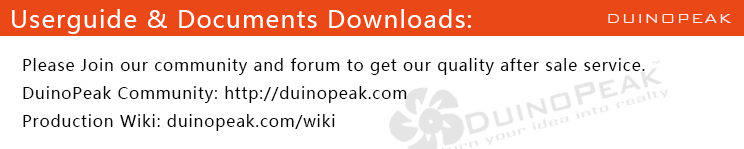
<style>
.page{position:relative;width:744px;height:149px;background:#ffffff}
.page>*{position:absolute;margin:0}
.t1{font:24px "MicrosoftYaHei";letter-spacing:0.05em;color:#ffffff}
.t2{font:18px "BankGothicBT-Light";letter-spacing:0.05em;color:#ffffff}
.t3{font:16px "MicrosoftYaHei";letter-spacing:0.05em;color:#000000}
</style>
<div class="page">
<p class="t1" style="left:12px;top:9px;width:459px;height:25px">Userguide &amp; Documents Downloads:</p>
<p class="t2" style="left:608px;top:14px;width:124px;height:9px;opacity:0.85">DUINOPEAK</p>
<p class="t3" style="left:23px;top:58px;width:622px;height:73px">Please Join our community and forum to get our quality after sale service.<br>DuinoPeak Community: http://duinopeak.com<br>Production Wiki: duinopeak.com/wiki</p>
</div>
